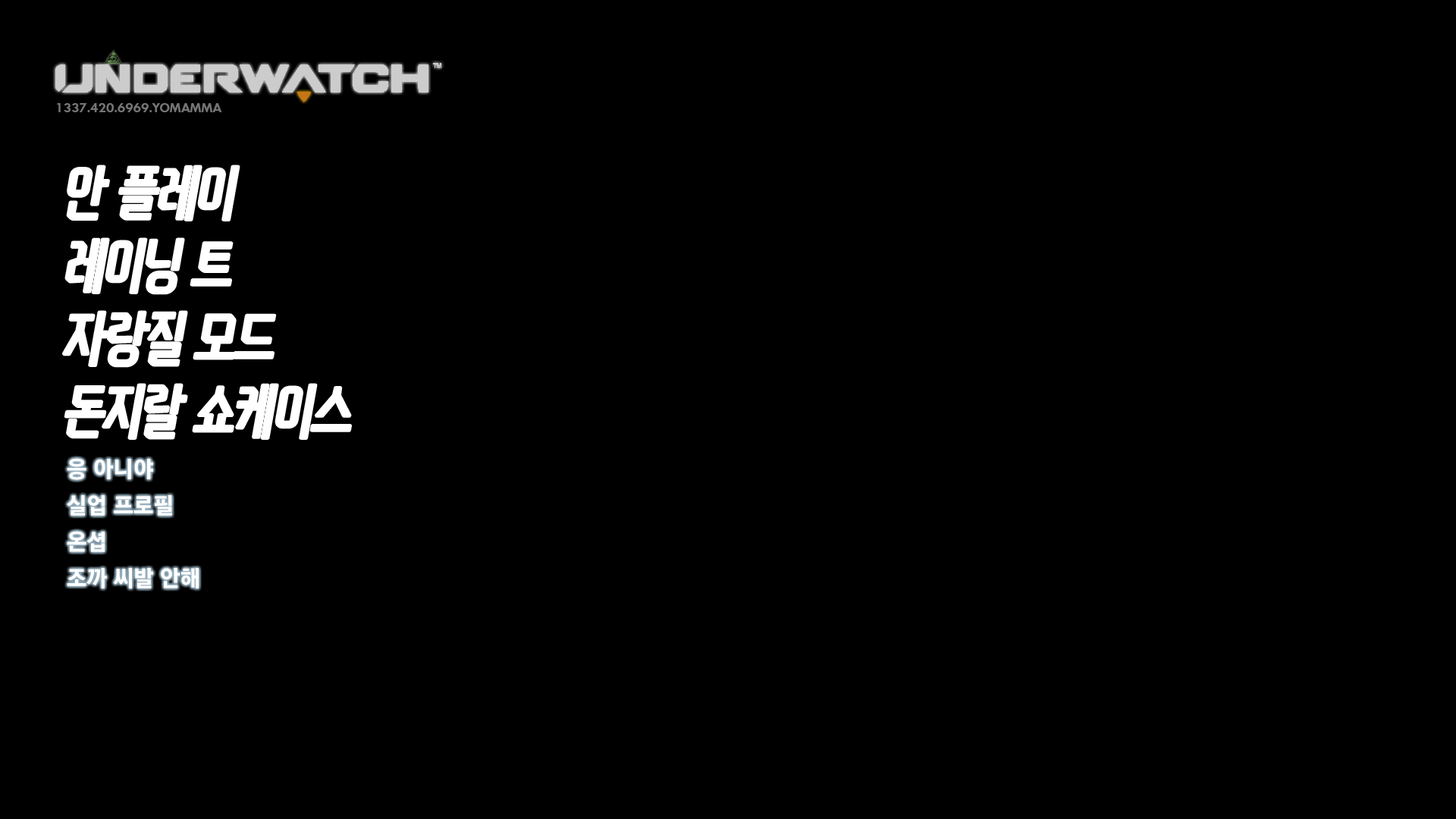
<style>
.page{position:relative;width:1456px;height:819px;background:#000000}
.page>*{position:absolute;margin:0}
.t1{font:13.6px "FuturaNo2D-DemiBold";color:#747474}
.t2{font:60.7px "Koverwatch";color:#ffffff;font-style:italic}
.t3{font:22.7px/36.4px "KoreanGD18-R";color:#ffffff}
</style>
<div class="page">
<p class="t1" style="left:57px;top:103px;width:165px;height:9px">1337.420.6969.YOMAMMA</p>
<p class="t2" style="left:64px;top:166px;width:286px;height:272px">안 플레이<br>레이닝 트<br>자랑질 모드<br>돈지랄 쇼케이스</p>
<p class="t3" style="left:67px;top:458px;width:132px;height:130px">응 아니야<br>실업 프로필<br>온셥<br>조까 씨발 안해</p>
</div>
